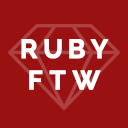
<style>
.page{position:relative;width:128px;height:128px;background:#991111}
.page>*{position:absolute;margin:0}
.t1{font:26px/31.2px "Raleway-Bold";letter-spacing:0.2em;color:#ffffff;font-weight:bold}
</style>
<div class="page">
<p class="t1" style="left:21px;top:39px;width:88px;height:51px;text-align:center">RUBY<br>FTW</p>
</div>
